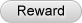
<style>
.page{position:relative;width:82px;height:23px}
.page>*{position:absolute;margin:0}
.t1{font:14px "ArialMT";color:#000000}
</style>
<div class="page">
<p class="t1" style="left:17px;top:3px;width:48px;height:17px">Reward</p>
</div>
